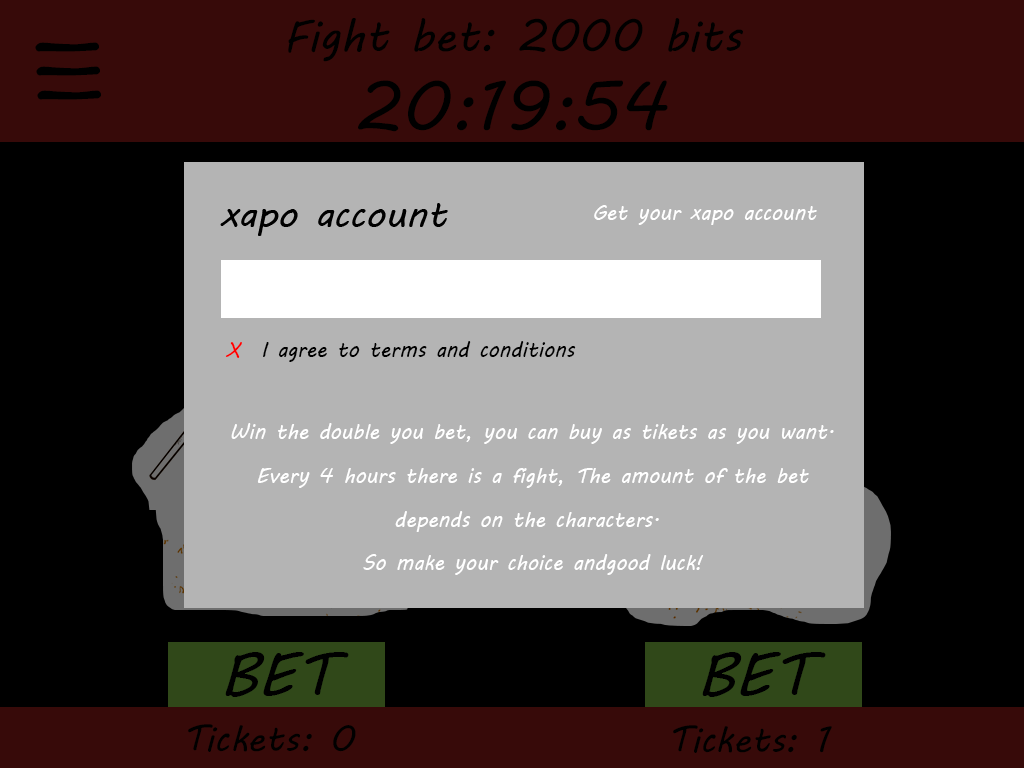
<style>
.page{position:relative;width:1024px;height:768px;background:#b4b4b4}
.page>*{position:absolute;margin:0}
.t1{font:45px "MVBoli";color:#000000}
.t2{font:88.5px "MVBoli";color:#000000;scale:0.94 1}
.t3{font:69.2px "MVBoli";color:#000000}
.t4{font:20.8px "MVBoli";color:#ffffff}
.t5{font:20.8px "MVBoli";color:#000000}
.t6{font:20.8px "MVBoli";color:#ff0000}
.t7{font:20.8px/43.8px "MVBoli";color:#ffffff}
.t8{font:62.3px "MVBoli";color:#000000}
.t9{font:36.4px "MVBoli";color:#000000}
</style>
<div class="page">
<p class="t1" style="left:288px;top:18px;width:455px;height:44px">Fight bet: 2000 bits</p>
<p class="t2" style="left:35px;top:42px;width:66px;height:58px;rotate:-92deg">III</p>
<p class="t3" style="left:358px;top:80px;width:310px;height:52px">20:19:54</p>
<p class="t4" style="left:594px;top:205px;width:223px;height:20px">Get your xapo account</p>
<p class="t5" style="left:225px;top:341px;width:351px;height:21px"><span class="t6">X</span>  I agree to terms and conditions</p>
<p class="t7" style="left:231px;top:423px;width:603px;height:152px;text-align:center">Win the double you bet, you can buy as tikets as you want.<br>Every 4 hours there is a fight, The amount of the bet<br>depends on the characters. <br>So make your choice andgood luck!</p>
<p class="t8" style="left:225px;top:652px;width:124px;height:45px">BET</p>
<p class="t8" style="left:702px;top:652px;width:124px;height:45px">BET</p>
<p class="t9" style="left:188px;top:724px;width:168px;height:28px">Tickets: 0</p>
<p class="t9" style="left:673px;top:725px;width:159px;height:28px">Tickets: 1</p>
</div>
